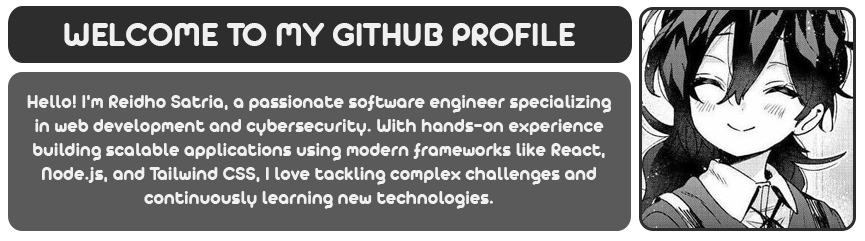
<style>
.page{position:relative;width:865px;height:241px;background:#5a5a5a}
.page>*{position:absolute;margin:0}
.t1{font:36px "AristaProAlternate-Bold";color:#f0f0f0}
.t2{font:20px "AristaProAlternate-Bold";color:#f0f0f0}
</style>
<div class="page">
<p class="t1" style="left:64px;top:22px;width:511px;height:24px">WELCOME TO MY GITHUB PROFILE</p>
<p class="t2" style="left:27px;top:95px;width:584px;height:114px;text-align:center">Hello! I'm Reidho Satria, a passionate software engineer specializing<br>in web development and cybersecurity. With hands-on experience<br>building scalable applications using modern frameworks like React,<br>Node.js, and Tailwind CSS, I love tackling complex challenges and<br>continuously learning new technologies.</p>
</div>
